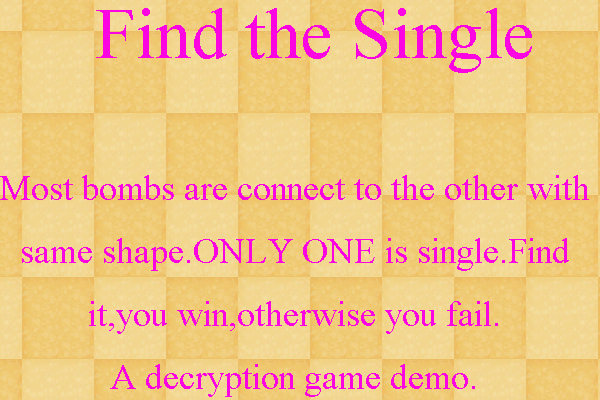
<style>
.page{position:relative;width:600px;height:400px}
.page>*{position:absolute;margin:0}
.t1{font:72px "TimesNewRomanPSMT";color:#fc03e2}
.t2{font:36px "TimesNewRomanPSMT";color:#fc03e2}
</style>
<div class="page">
<p class="t1" style="left:96px;top:8px;width:436px;height:65px">Find the Single</p>
<p class="t2" style="left:0px;top:175px;width:589px;height:222px;text-align:center">Most bombs are connect to the other with same shape.ONLY ONE is single.Find it,you win,otherwise you fail.<br>A decryption game demo.<br>a</p>
</div>
